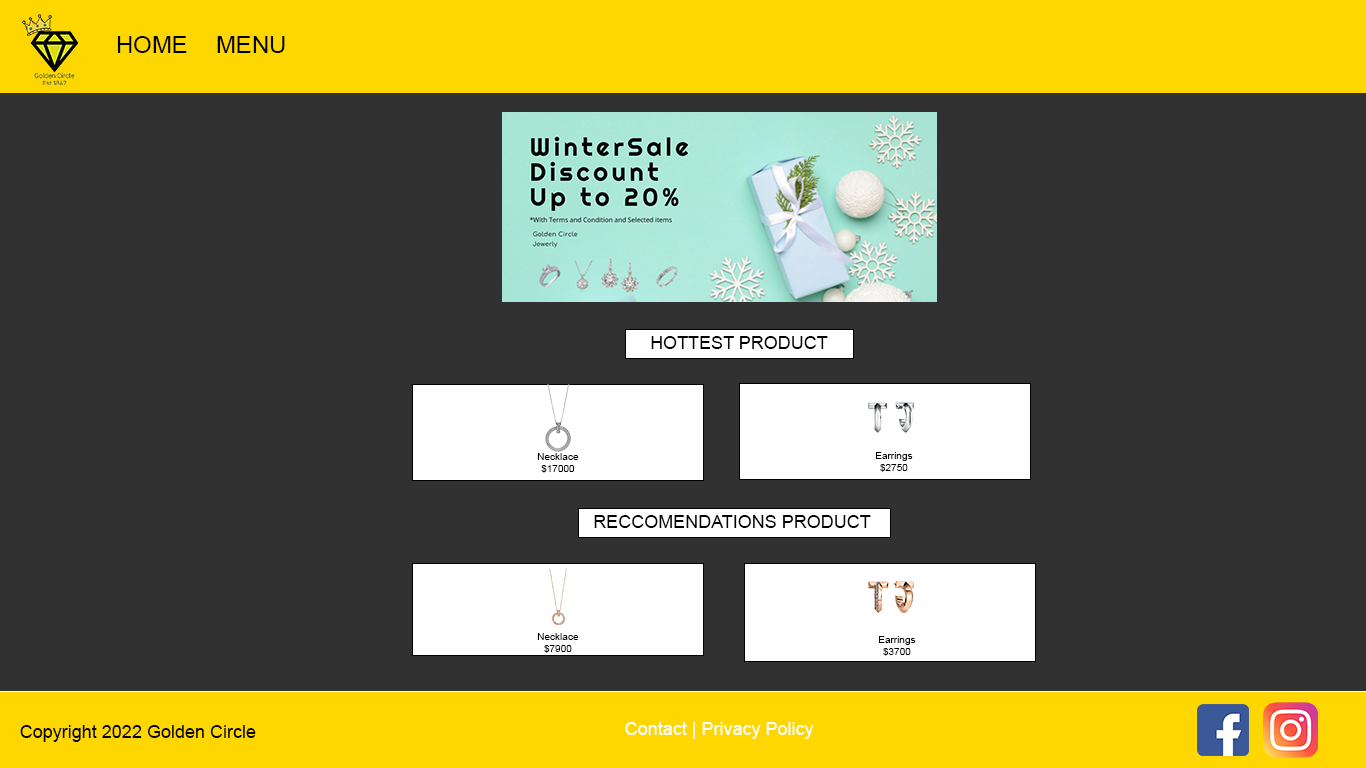
<style>
.page{position:relative;width:1366px;height:768px;background:#313131}
.page>*{position:absolute;margin:0}
.t1{font:24px "ArialMT";color:#010101}
.t2{font:18px "ArialMT";color:#010101}
.t3{font:10px "ArialMT";color:#000000}
.t4{font:18px "ArialMT";color:#ffffff}
</style>
<div class="page">
<p class="t1" style="left:117px;top:36px;width:70px;height:17px">HOME</p>
<p class="t1" style="left:217px;top:36px;width:68px;height:17px">MENU</p>
<p class="t2" style="left:651px;top:336px;width:177px;height:13px">HOTTEST PRODUCT</p>
<p class="t3" style="left:537px;top:453px;width:42px;height:20px;text-align:center">Necklace<br>$17000</p>
<p class="t3" style="left:876px;top:452px;width:37px;height:20px;text-align:center">Earrings<br>$2750</p>
<p class="t2" style="left:594px;top:515px;width:277px;height:13px">RECCOMENDATIONS PRODUCT</p>
<p class="t3" style="left:537px;top:633px;width:42px;height:20px;text-align:center">Necklace<br>$7900</p>
<p class="t3" style="left:879px;top:636px;width:37px;height:20px;text-align:center">Earrings<br>$3700</p>
<p class="t2" style="left:20px;top:725px;width:236px;height:17px">Copyright 2022 Golden Circle</p>
<p class="t4" style="left:625px;top:722px;width:189px;height:17px">Contact | Privacy Policy</p>
</div>
